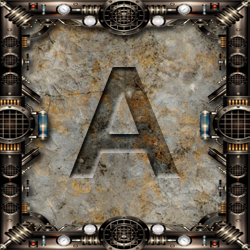
<style>
.page{position:relative;width:250px;height:250px}
.page>*{position:absolute;margin:0}
.t1{font:155px "Arial-BoldMT"}
</style>
<div class="page">
<p class="t1" style="left:68px;top:67px;width:113px;height:111px">A</p>
</div>
